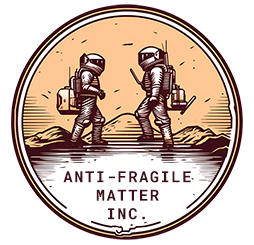
<style>
.page{position:relative;width:254px;height:245px;background:#ffffff}
.page>*{position:absolute;margin:0}
.t1{font:15.4px "RobotoMono-Bold";letter-spacing:0.1em;color:#3d1019}
</style>
<div class="page">
<p class="t1" style="left:63px;top:171px;width:128px;height:49px;text-align:center">ANTI-FRAGILE<br>MATTER<br>INC.</p>
</div>
